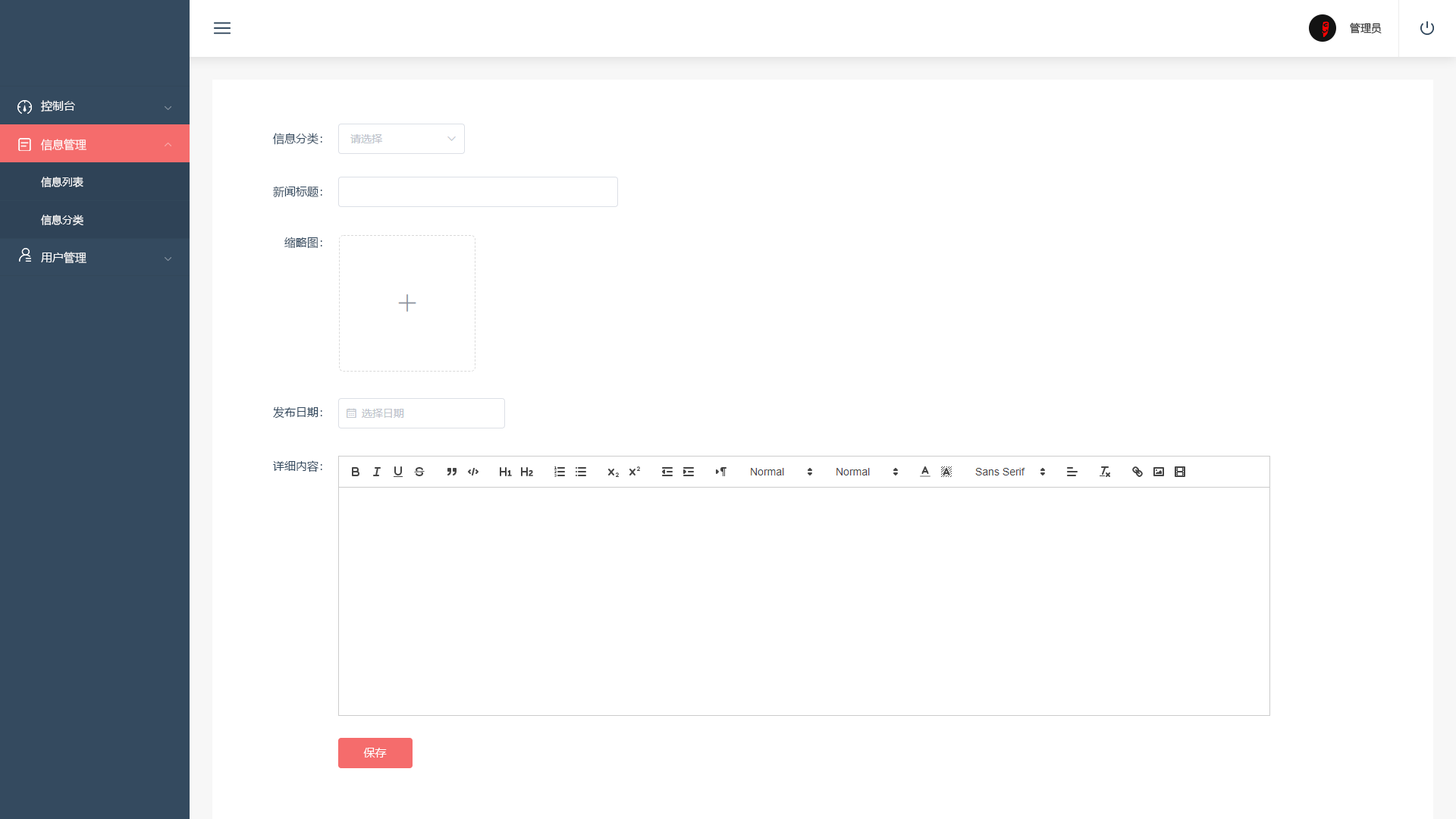
<style>
.page{position:relative;width:1456px;height:819px;background:#ffffff}
.page>*{position:absolute;margin:0}
.t1{font:10.6px "MicrosoftYaHei";color:#252525}
.t2{font:11.4px "MicrosoftYaHei";color:#ffffff}
.t3{font:11.4px "MicrosoftYaHei";color:#344a5f}
.t4{font:10.6px/37.9px "MicrosoftYaHei";color:#ffffff}
.t5{font:11.4px/37.9px "MicrosoftYaHei";color:#ffffff}
</style>
<div class="page">
<p class="t1" style="left:1350px;top:23px;width:32px;height:11px">管理员</p>
<p class="t2" style="left:41px;top:100px;width:34px;height:12px">控制台</p>
<p class="t3" style="left:273px;top:133px;width:49px;height:12px">信息分类：</p>
<p class="t4" style="left:41px;top:139px;width:45px;height:87px"><span class="t5">信息管理<br></span>信息列表<br>信息分类</p>
<p class="t3" style="left:273px;top:186px;width:49px;height:11px">新闻标题：</p>
<p class="t3" style="left:284px;top:237px;width:38px;height:12px">缩略图：</p>
<p class="t2" style="left:41px;top:252px;width:45px;height:11px">用户管理</p>
<p class="t3" style="left:273px;top:406px;width:49px;height:13px">发布日期：</p>
<p class="t3" style="left:273px;top:460px;width:49px;height:12px">详细内容：</p>
<p class="t2" style="left:363px;top:748px;width:24px;height:10px">保存</p>
</div>
